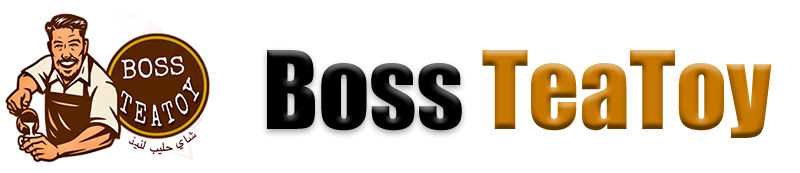
<style>
.page{position:relative;width:800px;height:173px;background:#ffffff}
.page>*{position:absolute;margin:0}
.t1{font:100px "Impact";color:#000000}
.t2{font:100px "Impact"}
</style>
<div class="page">
<p class="t1" style="left:267px;top:50px;width:195px;height:81px">Boss</p>
<p class="t2" style="left:482px;top:50px;width:290px;height:88px">TeaToy</p>
</div>
